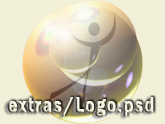
<style>
.page{position:relative;width:165px;height:124px;background:#f2f0d9}
.page>*{position:absolute;margin:0}
.t1{font:22px "FranklinGotT-DemCon";font-weight:bold}
</style>
<div class="page">
<p class="t1" style="left:7px;top:97px;width:147px;height:20px">extras/Logo.psd</p>
</div>
